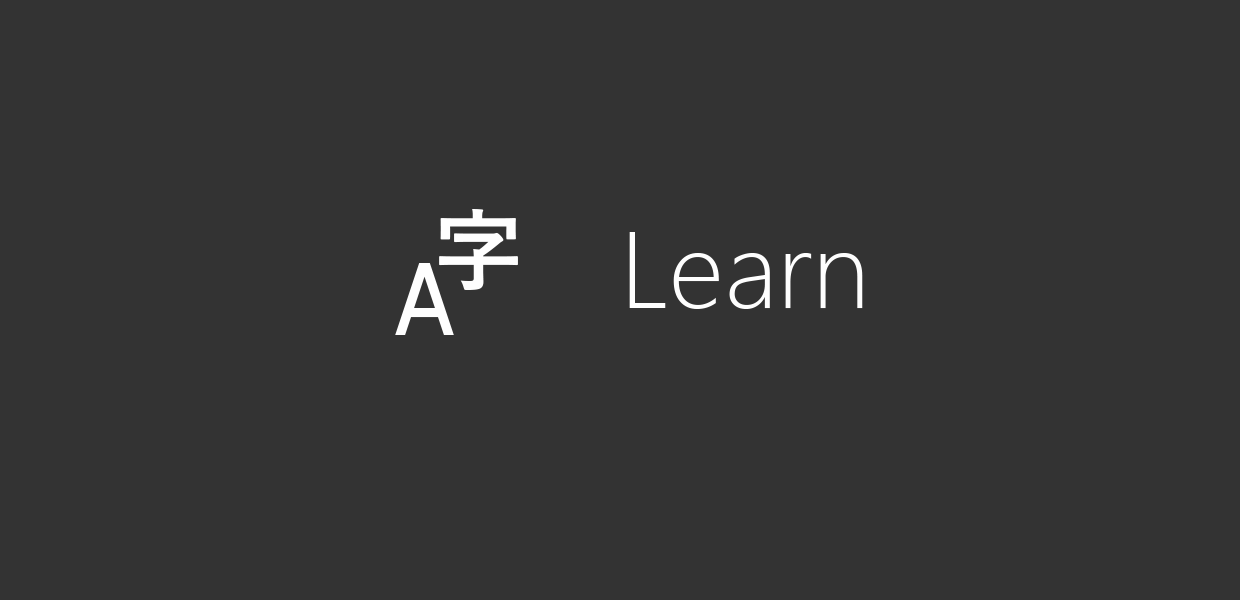
<style>
.page{position:relative;width:1240px;height:600px;background:#333333}
.page>*{position:absolute;margin:0}
.t1{font:108px "SegoeUI-Light";color:#fefefe}
</style>
<div class="page">
<p class="t1" style="left:629px;top:232px;width:234px;height:77px">Learn</p>
</div>
